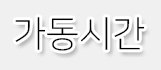
<style>
.page{position:relative;width:161px;height:70px;background:#f0f0f0}
.page>*{position:absolute;margin:0}
.t1{font:36px "NanumSquareL";color:#000000}
</style>
<div class="page">
<p class="t1" style="left:15px;top:17px;width:130px;height:34px">가동시간</p>
</div>
